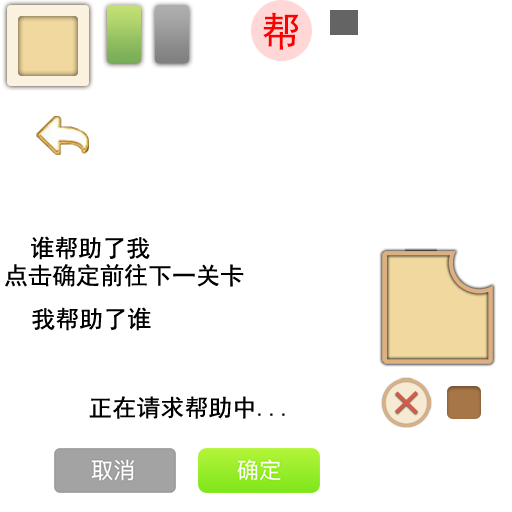
<style>
.page{position:relative;width:512px;height:512px;background:#ffffff}
.page>*{position:absolute;margin:0}
.t1{font:24px "SimHei";color:#000000}
</style>
<div class="page">
<p class="t1" style="left:31px;top:236px;width:119px;height:24px">谁帮助了我</p>
<p class="t1" style="left:5px;top:264px;width:239px;height:23px">点击确定前往下一关卡</p>
<p class="t1" style="left:32px;top:307px;width:119px;height:24px">我帮助了谁</p>
<p class="t1" style="left:89px;top:396px;width:196px;height:23px">正在请求帮助中...</p>
</div>
